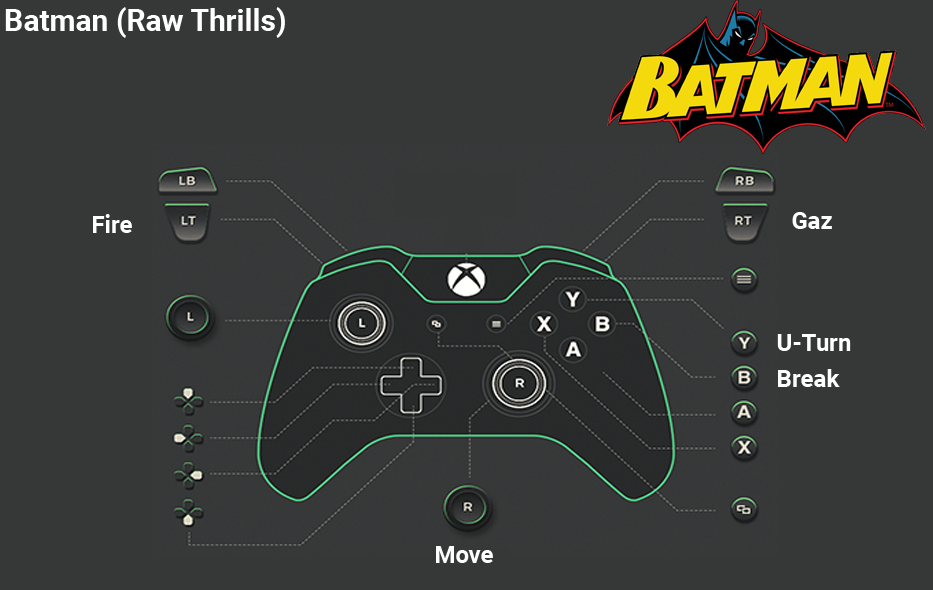
<style>
.page{position:relative;width:933px;height:590px;background:#363838}
.page>*{position:absolute;margin:0}
.t1{font:30px "Roboto-Bold";color:#ffffff}
.t2{font:24px "Roboto-Bold";color:#ffffff}
</style>
<div class="page">
<p class="t1" style="left:5px;top:7px;width:280px;height:31px">Batman (Raw Thrills)</p>
<p class="t2" style="left:93px;top:214px;width:39px;height:19px">Fire</p>
<p class="t2" style="left:792px;top:212px;width:40px;height:17px">Gaz</p>
<p class="t2" style="left:777px;top:334px;width:74px;height:17px">U-Turn</p>
<p class="t2" style="left:778px;top:369px;width:62px;height:18px">Break</p>
<p class="t2" style="left:436px;top:546px;width:57px;height:17px">Move</p>
</div>
